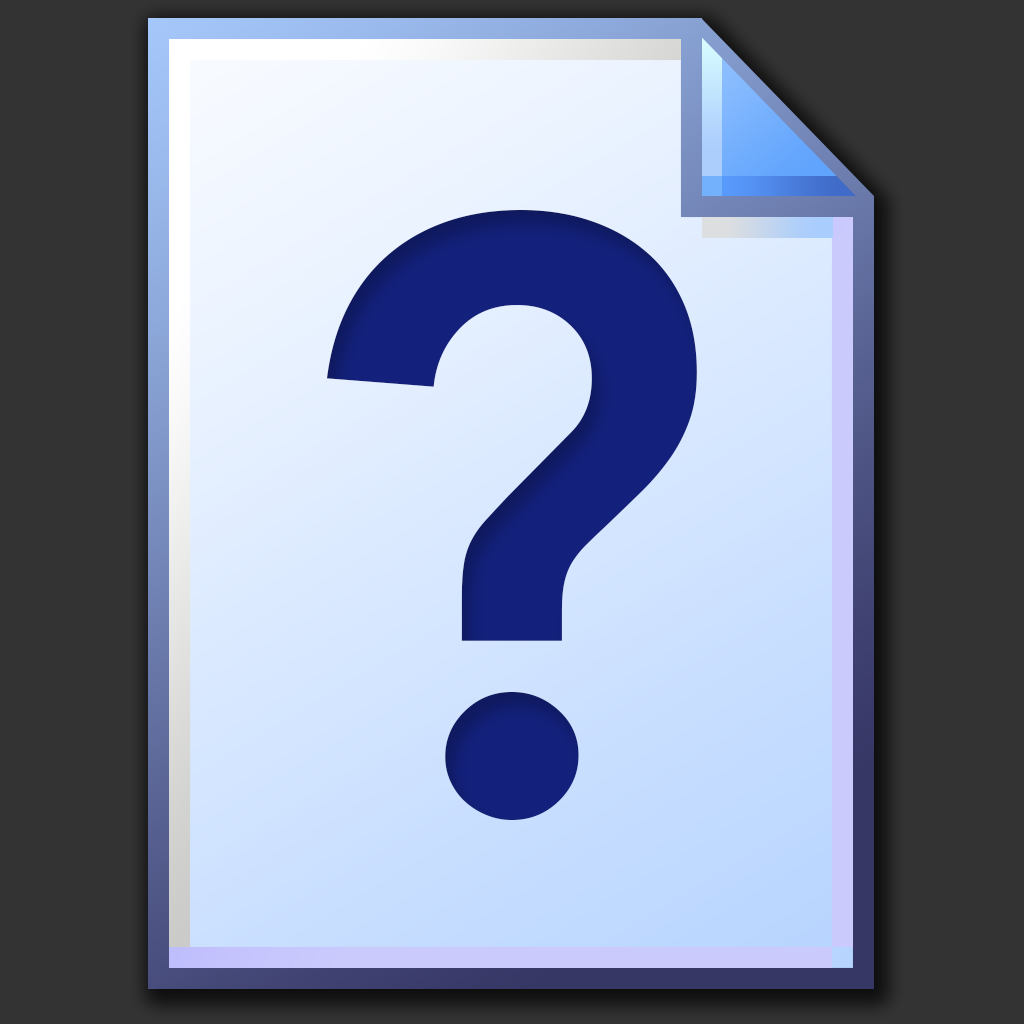
<style>
.page{position:relative;width:1024px;height:1024px;background:#333333}
.page>*{position:absolute;margin:0}
.t1{font:833.3px "Avenir-Heavy";letter-spacing:-0.025em;color:#13217c}
</style>
<div class="page">
<p class="t1" style="left:327px;top:210px;width:370px;height:610px">?</p>
</div>
